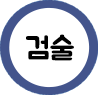
<style>
.page{position:relative;width:98px;height:95px;background:#ffffff}
.page>*{position:absolute;margin:0}
.t1{font:30px "BMJUA";color:#000000}
</style>
<div class="page">
<p class="t1" style="left:26px;top:34px;width:48px;height:27px">검술</p>
</div>
